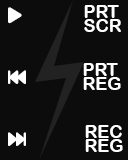
<style>
.page{position:relative;width:128px;height:160px;background:#0c0c0c}
.page>*{position:absolute;margin:0}
.t1{font:18px/14px "ArialRoundedMTBold";color:#ffffff}
</style>
<div class="page">
<p class="t1" style="left:84px;top:5px;width:37px;height:27px">PRT<br>SCR</p>
<p class="t1" style="left:83px;top:63px;width:38px;height:27px">PRT<br>REG</p>
<p class="t1" style="left:85px;top:125px;width:38px;height:27px">REC<br>REG</p>
</div>
